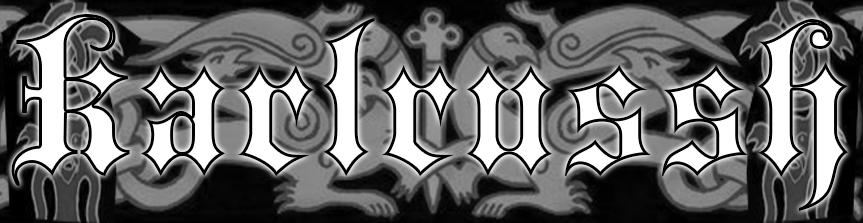
<style>
.page{position:relative;width:863px;height:223px}
.page>*{position:absolute;margin:0}
.t1{font:197px "BlackletterExtraBold";letter-spacing:0.04em;color:#ffffff}
</style>
<div class="page">
<p class="t1" style="left:11px;top:14px;width:837px;height:197px">Karlrussh</p>
</div>
